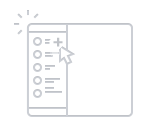
<style>
.page{position:relative;width:160px;height:140px;background:#ffffff}
.page>*{position:absolute;margin:0}
.t1{font:14px "BigruixianBlackGBV1.0";color:#c0c3c8}
</style>
<div class="page">
<p class="t1" style="left:53px;top:37px;width:10px;height:10px">+</p>
</div>
